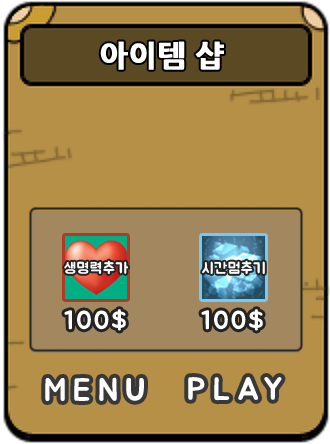
<style>
.page{position:relative;width:330px;height:444px;background:#b69047}
.page>*{position:absolute;margin:0}
.t1{font:15px "BMJUA";letter-spacing:0.06em;color:#ffffff}
.t2{font:26px "BMJUA";letter-spacing:0.06em;color:#ffffff}
.t3{font:32px "BMJUA";letter-spacing:0.22em;color:#ffffff}
</style>
<div class="page">
<p class="t1" style="left:64px;top:260px;width:65px;height:14px">생명력추가</p>
<p class="t1" style="left:202px;top:260px;width:63px;height:15px">시간멈추기</p>
<p class="t2" style="left:64px;top:309px;width:62px;height:22px">100$</p>
<p class="t2" style="left:201px;top:309px;width:62px;height:22px">100$</p>
<p class="t3" style="left:45px;top:377px;width:99px;height:24px">MENU</p>
<p class="t3" style="left:188px;top:377px;width:94px;height:24px">PLAY</p>
</div>
